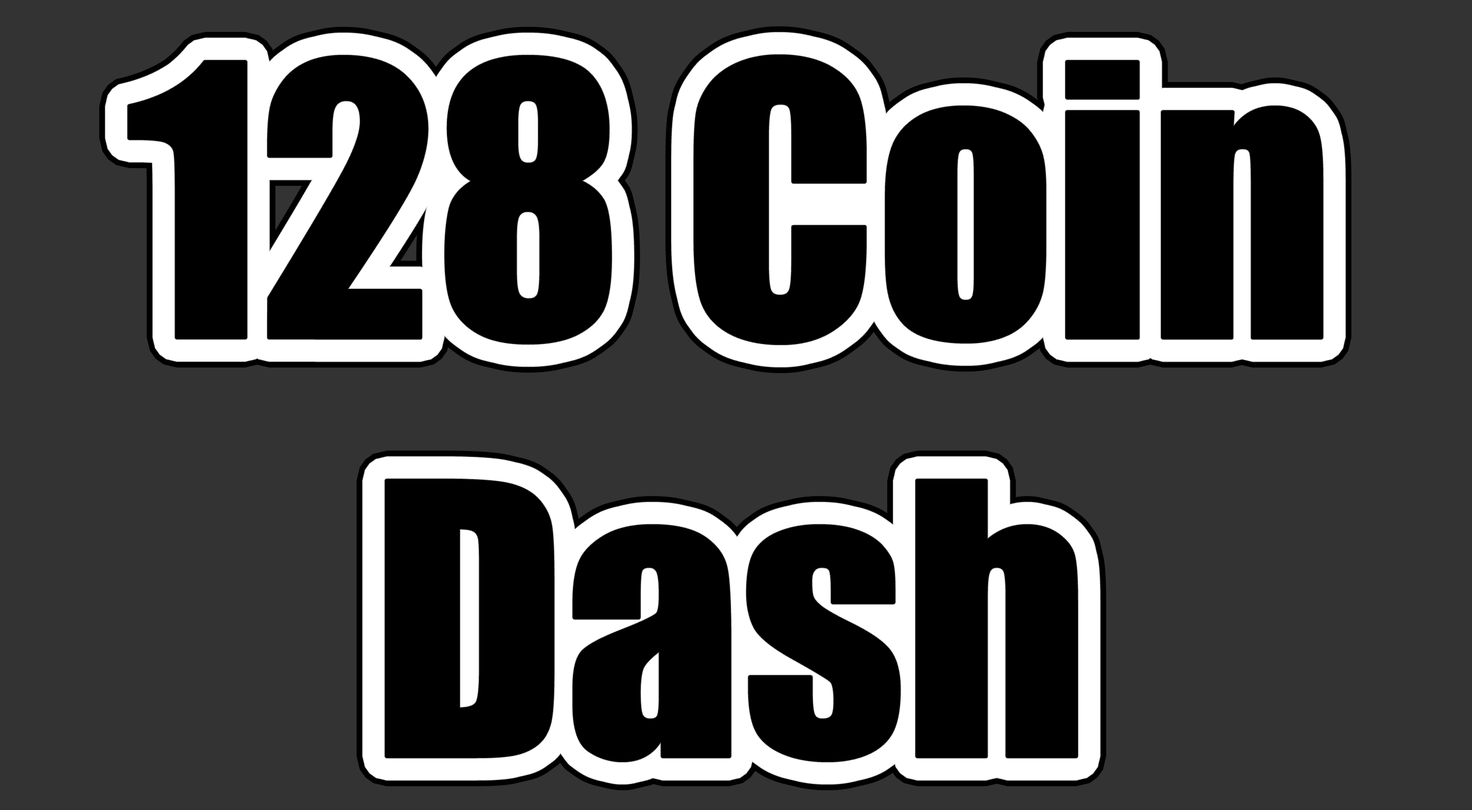
<style>
.page{position:relative;width:1472px;height:810px;background:#333333}
.page>*{position:absolute;margin:0}
.t1{font:348.9px "Impact";color:#000000}
</style>
<div class="page">
<p class="t1" style="left:129px;top:56px;width:1193px;height:705px;text-align:center">128 Coin<br>Dash</p>
</div>
